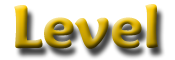
<style>
.page{position:relative;width:175px;height:60px;background:#ffffff}
.page>*{position:absolute;margin:0}
.t1{font:60px "MaiandraGD-DemiBold"}
</style>
<div class="page">
<p class="t1" style="left:14px;top:4px;width:144px;height:45px">Level</p>
</div>
